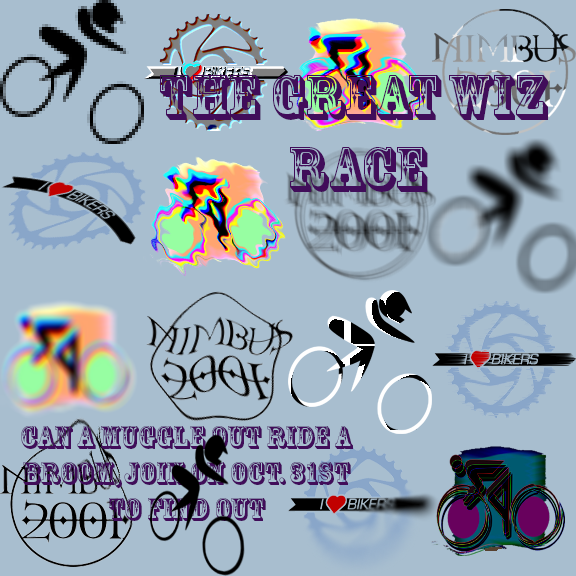
<style>
.page{position:relative;width:576px;height:576px;background:#a8becf}
.page>*{position:absolute;margin:0}
.t1{font:60px "RosewoodStd-Regular";color:#410d5a}
.t2{font:30px "RosewoodStd-Regular";color:#410d5a}
</style>
<div class="page">
<p class="t1" style="left:160px;top:75px;width:388px;height:117px;text-align:center">The Great Wiz<br> Race</p>
<p class="t2" style="left:21px;top:426px;width:332px;height:95px;text-align:center">Can a muggle out ride a broom, Join on Oct. 31st to find out</p>
</div>
